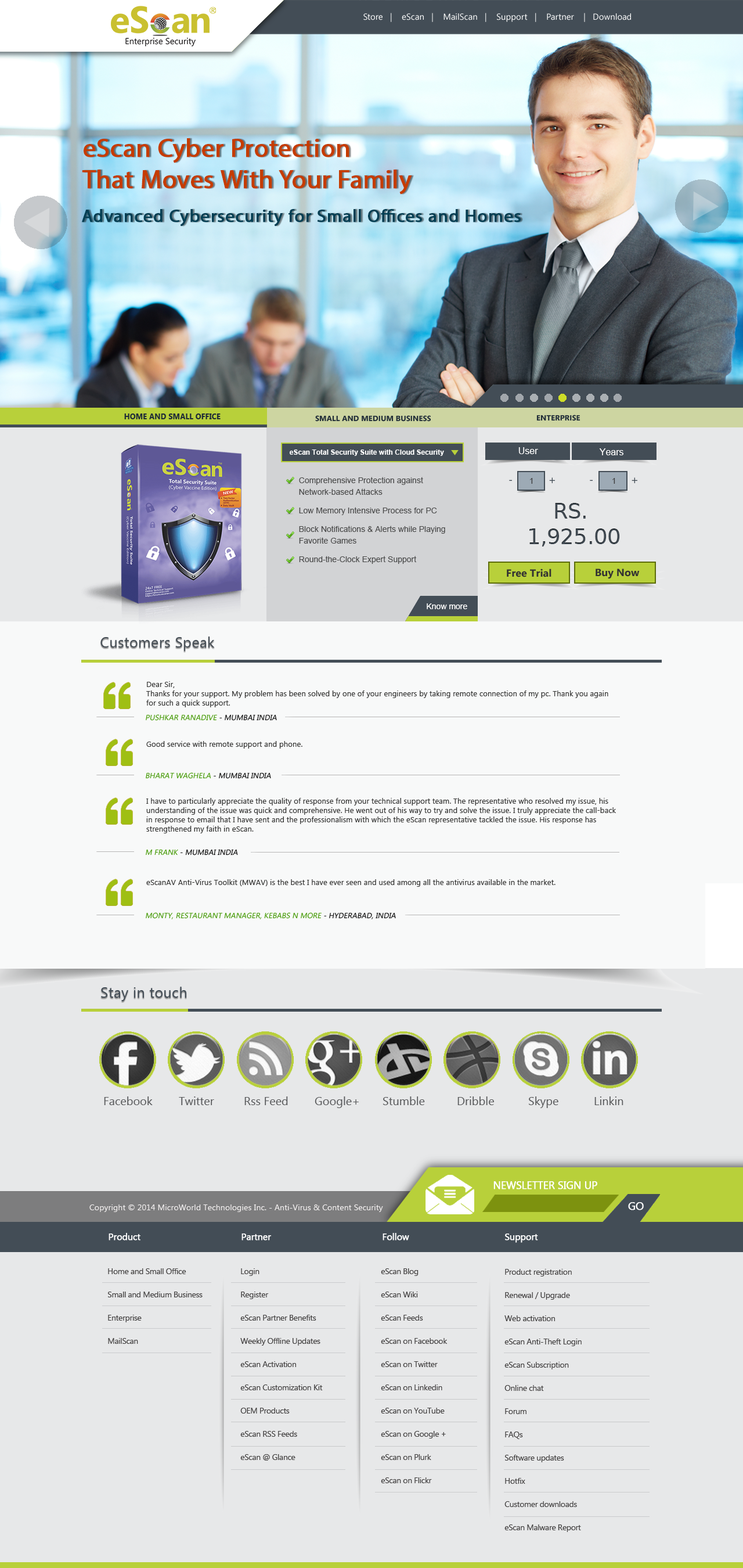
<style>
.page{position:relative;width:743px;height:1568px;background:#e7e8e9}
.page>*{position:absolute;margin:0}
.t1{font:8.7px "SegoeUI";color:#ffffff}
.t2{font:26.1px "MyriadPro-Regular";color:#c53c00;font-weight:bold}
.t3{font:18px "MyriadPro-Regular";letter-spacing:0.025em;color:#003e53;font-weight:bold}
.t4{font:7.5px "SegoeUI-Bold";letter-spacing:0.01em;color:#202c37;text-transform:uppercase}
.t5{font:7.5px "Segoe-Bold";letter-spacing:0.01em;color:#202c37;text-transform:uppercase}
.t6{font:7px "Arial-BoldMT";color:#ffffff}
.t7{font:9.3px "ArialMT";color:#ffffff}
.t8{font:17.2px "TheSans-7BoldCaps";color:#b8d03a;scale:0.61 1}
.t9{font:8.1px/11.6px "ArialMT";color:#4a4a4a}
.t10{font:10.5px "MyriadPro-Regular";color:#434d56}
.t11{font:8.1px "ArialMT";color:#3d3d3d}
.t12{font:21.5px "RupeeForadian";letter-spacing:-0.01em;color:#434d56;text-transform:uppercase}
.t13{font:10.5px "Segoe-Bold";color:#333232}
.t14{font:8.1px "ArialMT";color:#ffffff}
.t15{font:14.5px "SegoeUI";letter-spacing:0.02em;color:#485057}
.t16{font:7.5px/9.3px "SegoeUI";letter-spacing:0.01em;color:#353534}
.t17{font:7.5px "SegoeUI";letter-spacing:0.01em;color:#499c0b;font-style:italic}
.t18{font:7.5px "SegoeUI";letter-spacing:0.01em;color:#111111;font-style:italic}
.t19{font:7.5px "SegoeUI";letter-spacing:0.01em;color:#353534}
.t20{font:14.5px "SegoeUI";letter-spacing:0.02em;color:#434d56}
.t21{font:11.6px "SegoeUI";color:#58595b}
.t22{font:10.5px "SegoeUI";letter-spacing:-0.02em;color:#ffffff;font-weight:bold}
.t23{font:8.1px "SegoeUI";letter-spacing:0.01em;color:#f3f0f0}
.t24{font:11.1px "SegoeUI";letter-spacing:-0.025em;color:#ffffff;font-weight:bold}
.t25{font:9.3px "SegoeUI";letter-spacing:-0.025em;color:#ffffff;font-weight:bold}
.t26{font:8.1px/23.2px "SegoeUI";letter-spacing:-0.025em;color:#424040}
</style>
<div class="page">
<p class="t1" style="left:364px;top:13px;width:267px;height:9px">Store   |    eScan   |    MailScan   |    Support   |    Partner    |   Download</p>
<p class="t2" style="left:82px;top:138px;width:330px;height:57px">eScan Cyber Protection <br>That Moves With Your Family</p>
<p class="t3" style="left:82px;top:209px;width:439px;height:17px">Advanced Cybersecurity for Small Offices and Homes</p>
<p class="t4" style="left:124px;top:413px;width:97px;height:6px">Home and Small Office</p>
<p class="t5" style="left:315px;top:415px;width:116px;height:7px">Small and Medium Business</p>
<p class="t5" style="left:537px;top:415px;width:44px;height:6px">Enterprise</p>
<p class="t6" style="left:290px;top:449px;width:154px;height:7px">eScan Total Security Suite with Cloud Security</p>
<p class="t7" style="left:519px;top:447px;width:19px;height:7px">User</p>
<p class="t7" style="left:599px;top:448px;width:25px;height:7px">Years</p>
<p class="t8" style="left:451px;top:450px;width:8px;height:5px;rotate:90deg">&gt;</p>
<p class="t9" style="left:299px;top:477px;width:146px;height:87px">Comprehensive Protection against Network-based Attacks<br>Low Memory Intensive Process for PC<br>Block Notifications &amp; Alerts while Playing Favorite Games<br>Round-the-Clock Expert Support</p>
<p class="t10" style="left:509px;top:480px;width:3px;height:1px">-</p>
<p class="t11" style="left:530px;top:478px;width:3px;height:6px">1</p>
<p class="t10" style="left:549px;top:477px;width:6px;height:6px">+</p>
<p class="t10" style="left:590px;top:480px;width:3px;height:1px">-</p>
<p class="t11" style="left:613px;top:478px;width:3px;height:6px">1</p>
<p class="t10" style="left:632px;top:477px;width:6px;height:6px">+</p>
<p class="t12" style="left:530px;top:503px;width:90px;height:43px;text-align:center">Rs. <br>1,925.00</p>
<p class="t13" style="left:507px;top:569px;width:45px;height:8px">Free Trial</p>
<p class="t13" style="left:596px;top:569px;width:44px;height:10px">Buy Now</p>
<p class="t14" style="left:427px;top:603px;width:40px;height:6px">Know more</p>
<p class="t15" style="left:100px;top:636px;width:115px;height:15px">Customers Speak</p>
<p class="t16" style="left:146px;top:681px;width:463px;height:26px">Dear Sir, <br>Thanks for your support. My problem has been solved by one of your engineers by taking remote connection of my pc. Thank you again for such a quick support.</p>
<p class="t17" style="left:146px;top:714px;width:131px;height:7px">PUSHKAR RANADIVE<span class="t18"> - MUMBAI INDIA</span></p>
<p class="t19" style="left:146px;top:741px;width:157px;height:8px">Good service with remote support and phone.</p>
<p class="t17" style="left:146px;top:772px;width:125px;height:7px">BHARAT WAGHELA<span class="t18"> - MUMBAI INDIA</span></p>
<p class="t16" style="left:146px;top:798px;width:470px;height:35px">I have to particularly appreciate the quality of response from your technical support team. The representative who resolved my issue, his understanding of the issue was quick and comprehensive. He went out of his way to try and solve the issue. I truly appreciate the call-back in response to email that I have sent and the professionalism with which the eScan representative tackled the issue. His response has strengthened my faith in eScan.</p>
<p class="t18" style="left:146px;top:849px;width:92px;height:6px"><span class="t17">M FRANK</span> - MUMBAI INDIA</p>
<p class="t19" style="left:146px;top:879px;width:410px;height:8px">eScanAV Anti-Virus Toolkit (MWAV) is the best I have ever seen and used among all the antivirus available in the market.</p>
<p class="t17" style="left:146px;top:912px;width:250px;height:7px">MONTY, RESTAURANT MANAGER, KEBABS N MORE<span class="t18"> - HYDERABAD, INDIA</span></p>
<p class="t20" style="left:101px;top:987px;width:85px;height:14px">Stay in touch</p>
<p class="t21" style="left:104px;top:1096px;width:49px;height:9px">Facebook</p>
<p class="t21" style="left:179px;top:1096px;width:35px;height:9px">Twitter</p>
<p class="t21" style="left:244px;top:1096px;width:44px;height:9px">Rss Feed</p>
<p class="t21" style="left:315px;top:1096px;width:44px;height:12px">Google+</p>
<p class="t21" style="left:383px;top:1096px;width:42px;height:9px">Stumble</p>
<p class="t21" style="left:458px;top:1096px;width:36px;height:9px">Dribble</p>
<p class="t21" style="left:529px;top:1096px;width:30px;height:12px">Skype</p>
<p class="t21" style="left:595px;top:1096px;width:29px;height:9px">Linkin</p>
<p class="t22" style="left:494px;top:1181px;width:104px;height:8px">NEWSLETTER SIGN UP</p>
<p class="t23" style="left:89px;top:1204px;width:294px;height:8px">Copyright © 2014 MicroWorld Technologies Inc. - Anti-Virus &amp; Content Security</p>
<p class="t24" style="left:628px;top:1202px;width:16px;height:8px">GO</p>
<p class="t25" style="left:109px;top:1233px;width:32px;height:7px">Product</p>
<p class="t25" style="left:242px;top:1233px;width:30px;height:7px">Partner</p>
<p class="t25" style="left:383px;top:1233px;width:26px;height:7px">Follow</p>
<p class="t25" style="left:505px;top:1233px;width:33px;height:10px">Support</p>
<p class="t26" style="left:108px;top:1268px;width:95px;height:76px">Home and Small Office<br>Small and Medium Business<br>Enterprise<br>MailScan</p>
<p class="t26" style="left:240px;top:1268px;width:83px;height:193px">Login<br>Register<br>eScan Partner Benefits<br>Weekly Offline Updates<br>eScan Activation<br>eScan Customization Kit<br>OEM Products<br>eScan RSS Feeds<br>eScan @ Glance</p>
<p class="t26" style="left:381px;top:1268px;width:67px;height:215px">eScan Blog<br>eScan Wiki<br>eScan Feeds<br>eScan on Facebook<br>eScan on Twitter<br>eScan on Linkedin<br>eScan on YouTube <br>eScan on Google +<br>eScan on Plurk<br>eScan on Flickr</p>
<p class="t26" style="left:505px;top:1269px;width:77px;height:263px">Product registration<br>Renewal / Upgrade<br>Web activation<br>eScan Anti-Theft Login<br>eScan Subscription <br>Online chat<br>Forum<br>FAQs<br>Software updates<br>Hotfix<br>Customer downloads<br>eScan Malware Report</p>
</div>
